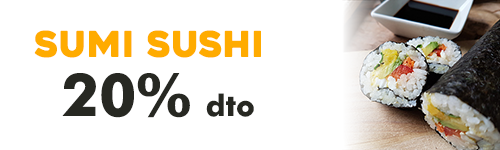
<style>
.page{position:relative;width:500px;height:150px;background:#ffffff}
.page>*{position:absolute;margin:0}
.t1{font:35.6px "Heavitas";color:#ffab00}
.t2{font:59.4px "FuturaBT-Bold";color:#272822}
.t3{font:29.7px "FuturaBT-Bold";color:#272822}
</style>
<div class="page">
<p class="t1" style="left:34px;top:30px;width:227px;height:28px">SUMI SUSHI</p>
<p class="t2" style="left:62px;top:73px;width:192px;height:45px">20% <span class="t3">dto</span></p>
</div>
